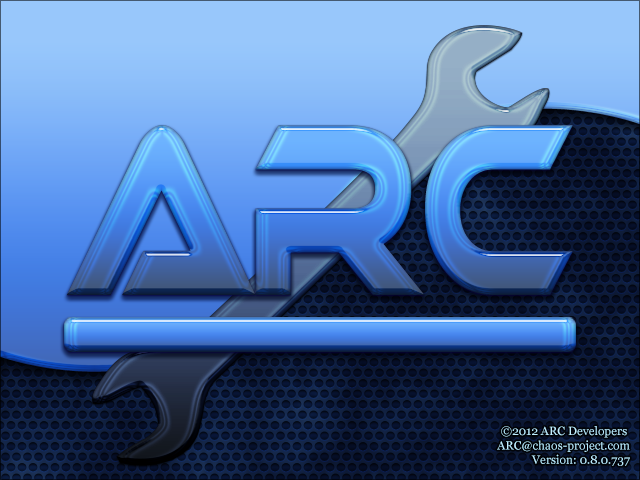
<style>
.page{position:relative;width:640px;height:480px}
.page>*{position:absolute;margin:0}
.t1{font:12px "Georgia";color:#c0edff}
</style>
<div class="page">
<p class="t1" style="left:497px;top:426px;width:133px;height:40px;text-align:right">©2012 ARC Developers <br>ARC@chaos-project.com<br>Version: 0.8.0.737</p>
</div>
